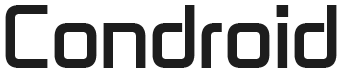
<style>
.page{position:relative;width:349px;height:76px;background:#ffffff}
.page>*{position:absolute;margin:0}
.t1{font:72px "Zekton-Bold";color:#1d1d1d}
</style>
<div class="page">
<p class="t1" style="left:5px;top:5px;width:332px;height:63px">Condroid</p>
</div>
